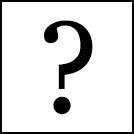
<style>
.page{position:relative;width:134px;height:134px;background:#ffffff}
.page>*{position:absolute;margin:0}
.t1{font:130px "Georgia";color:#000000}
</style>
<div class="page">
<p class="t1" style="left:44px;top:20px;width:49px;height:95px">?</p>
</div>
